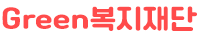
<style>
.page{position:relative;width:200px;height:40px;background:#ffffff}
.page>*{position:absolute;margin:0}
.t1{font:28.2px "Cafe24Ssurround";color:#ff4b4b}
</style>
<div class="page">
<p class="t1" style="left:2px;top:6px;width:195px;height:25px">Green복지재단</p>
</div>
